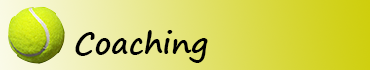
<style>
.page{position:relative;width:370px;height:70px}
.page>*{position:absolute;margin:0}
.t1{font:30px "SegoePrint-Bold";color:#000000}
</style>
<div class="page">
<p class="t1" style="left:75px;top:30px;width:133px;height:33px">Coaching</p>
</div>
